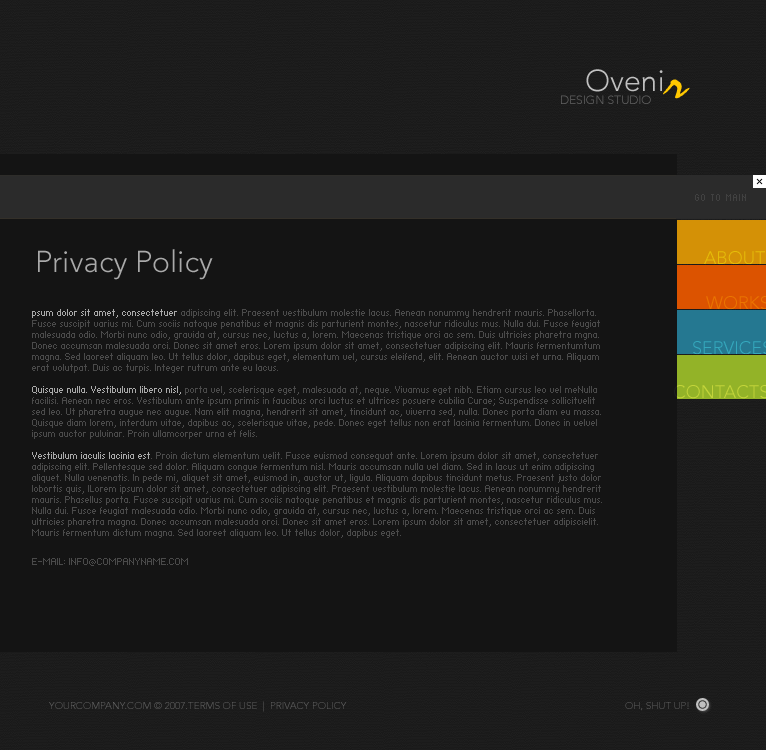
<style>
.page{position:relative;width:766px;height:750px;background:#141414}
.page>*{position:absolute;margin:0}
.t1{font:30px "Avenir-Light";color:#c0c0c0}
.t2{font:30px "Avenir-Light";letter-spacing:0.12em;color:#c0c0c0}
.t3{font:52px "Staccato222BT-Regular";letter-spacing:0.12em;color:#ffc800}
.t4{font:12px "Avenir-Light";color:#626262;text-transform:uppercase}
.t5{font:8px "Standard0758";color:#414141;text-transform:uppercase}
.t6{font:30px "Avenir-Light";color:#aaaaaa}
.t7{font:8px/11px "Standard0755";color:#4a4a4a}
.t8{font:8px/11px "Standard0755";color:#aaaaaa}
.t9{font:8px "Standard0755";color:#4a4a4a;text-transform:uppercase}
.t10{font:10px "Avenir-Light";color:#626262;text-transform:uppercase}
</style>
<div class="page">
<p class="t1" style="left:586px;top:69px;width:104px;height:30px">Oven<span class="t2">i</span><span class="t3">r</span></p>
<p class="t4" style="left:561px;top:95px;width:90px;height:9px">design studio</p>
<p class="t5" style="left:695px;top:194px;width:51px;height:7px">go to main</p>
<p class="t6" style="left:38px;top:249px;width:175px;height:31px">Privacy Policy</p>
<p class="t7" style="left:32px;top:309px;width:570px;height:229px"><span class="t8">psum dolor sit amet, consectetuer </span>adipiscing elit. Praesent vestibulum molestie lacus. Aenean nonummy hendrerit mauris. Phasellorta. Fusce suscipit varius mi. Cum sociis natoque penatibus et magnis dis parturient montes, nascetur ridiculus mus. Nulla dui. Fusce feugiat malesuada odio. Morbi nunc odio, gravida at, cursus nec, luctus a, lorem. Maecenas tristique orci ac sem. Duis ultricies pharetra mgna. Donec accumsan malesuada orci. Donec sit amet eros. Lorem ipsum dolor sit amet, consectetuer adipiscing elit. Mauris fermentumtum magna. Sed laoreet aliquam leo. Ut tellus dolor, dapibus eget, elementum vel, cursus eleifend, elit. Aenean auctor wisi et urna. Aliquam erat volutpat. Duis ac turpis. Integer rutrum ante eu lacus.<br><br><span class="t8">Quisque nulla. Vestibulum libero nisl,</span> porta vel, scelerisque eget, malesuada at, neque. Vivamus eget nibh. Etiam cursus leo vel meNulla facilisi. Aenean nec eros. Vestibulum ante ipsum primis in faucibus orci luctus et ultrices posuere cubilia Curae; Suspendisse sollicitvelit <br>sed leo. Ut pharetra augue nec augue. Nam elit magna, hendrerit sit amet, tincidunt ac, viverra sed, nulla. Donec porta diam eu massa. Quisque diam lorem, interdum vitae, dapibus ac, scelerisque vitae, pede. Donec eget tellus non erat lacinia fermentum. Donec in velvel ipsum auctor pulvinar. Proin ullamcorper urna et felis.<br><br><span class="t8">Vestibulum iaculis lacinia est</span>. Proin dictum elementum velit. Fusce euismod consequat ante. Lorem ipsum dolor sit amet, consectetuer adipiscing elit. Pellentesque sed dolor. Aliquam congue fermentum nisl. Mauris accumsan nulla vel diam. Sed in lacus ut enim adipiscing aliquet. Nulla venenatis. In pede mi, aliquet sit amet, euismod in, auctor ut, ligula. Aliquam dapibus tincidunt metus. Praesent justo dolor<br>lobortis quis, lLorem ipsum dolor sit amet, consectetuer adipiscing elit. Praesent vestibulum molestie lacus. Aenean nonummy hendrerit mauris. Phasellus porta. Fusce suscipit varius mi. Cum sociis natoque penatibus et magnis dis parturient montes, nascetur ridiculus mus. Nulla dui. Fusce feugiat malesuada odio. Morbi nunc odio, gravida at, cursus nec, luctus a, lorem. Maecenas tristique orci ac sem. Duis ultricies pharetra magna. Donec accumsan malesuada orci. Donec sit amet eros. Lorem ipsum dolor sit amet, consectetuer adipiscielit. Mauris fermentum dictum magna. Sed laoreet aliquam leo. Ut tellus dolor, dapibus eget.<br> elementum vel, cursus eleifend, elit. Aenean auctor wisi et urna. Aliquam erat volutpat. Duis ac turpis. Integer rutrum ante eu lacus.<br><br>Quisque nulla. Vestibulum libero nisl, porta vel, scelerisque eget, malesuada at, neque. Vivamus eget nibh. Etiam cursus leo vel metus. Nulla facilisi. Aenean nec eros. Vestibulum ante ipsum primis in faucibus orci luctus et ultrices posuere cubilia Curae; Suspendisse sollicitudin velit sed leo. Ut pharetra augue nec augue. Nam elit magna, hendrerit sit amet, tincidunt ac, viverra sed, nulla. Donec porta diam eu massa. Quisque diam lorem, interdum vitae, dapibus ac, scelerisque vitae, pede. Donec eget tellus non erat lacinia fermentum. Donec in velit vel ipsum auctor pulvinar. Proin ullamcorper urna et felis.<br><br>Vestibulum iaculis lacinia est. Proin dictum elementum velit. Fusce euismod consequat ante. Lorem ipsum dolor sit amet, consectetuer adipiscing elit. Pellentesque sed dolor. Aliquam congue fermentum nisl. Mauris accumsan nulla vel diam. Sed in lacus ut enim adipiscing aliquet. Nulla venenatis. In pede mi, aliquet sit amet, euismod in, auctor ut, ligula. Aliquam dapibus tincidunt metus. Praesent justo dolor, lobortis quis, l</p>
<p class="t9" style="left:32px;top:558px;width:156px;height:8px">E-mail: info@companyname.com</p>
<p class="t10" style="left:49px;top:701px;width:298px;height:11px">YourCompany.Com © 2007.Terms of use  |  Privacy Policy</p>
<p class="t10" style="left:625px;top:702px;width:64px;height:9px">oh, shut up!</p>
</div>
